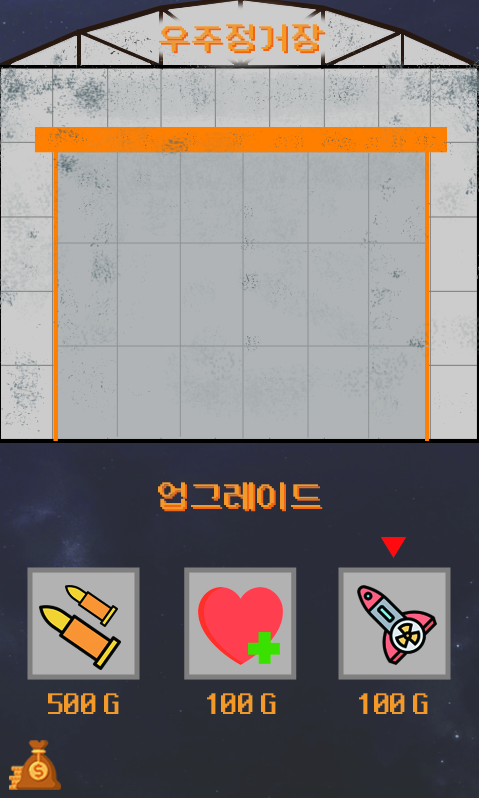
<style>
.page{position:relative;width:479px;height:798px}
.page>*{position:absolute;margin:0}
.t1{font:33.3px "NeoDunggeunmo-Regular";color:#f39929}
.t2{font:33.3px "NeoDunggeunmo-Regular"}
.t3{font:33.3px "NeoDunggeunmo-Regular";color:#f06415}
</style>
<div class="page">
<p class="t1" style="left:159px;top:24px;width:165px;height:28px">우주정거장</p>
<p class="t2" style="left:161px;top:26px;width:165px;height:28px">우주정거장</p>
<p class="t1" style="left:158px;top:482px;width:163px;height:28px">업그레이드</p>
<p class="t3" style="left:160px;top:484px;width:163px;height:28px">업그레이드</p>
<p class="t1" style="left:48px;top:693px;width:71px;height:21px">500 G</p>
<p class="t1" style="left:207px;top:693px;width:69px;height:21px">100 G</p>
<p class="t1" style="left:359px;top:693px;width:69px;height:21px">100 G</p>
</div>
